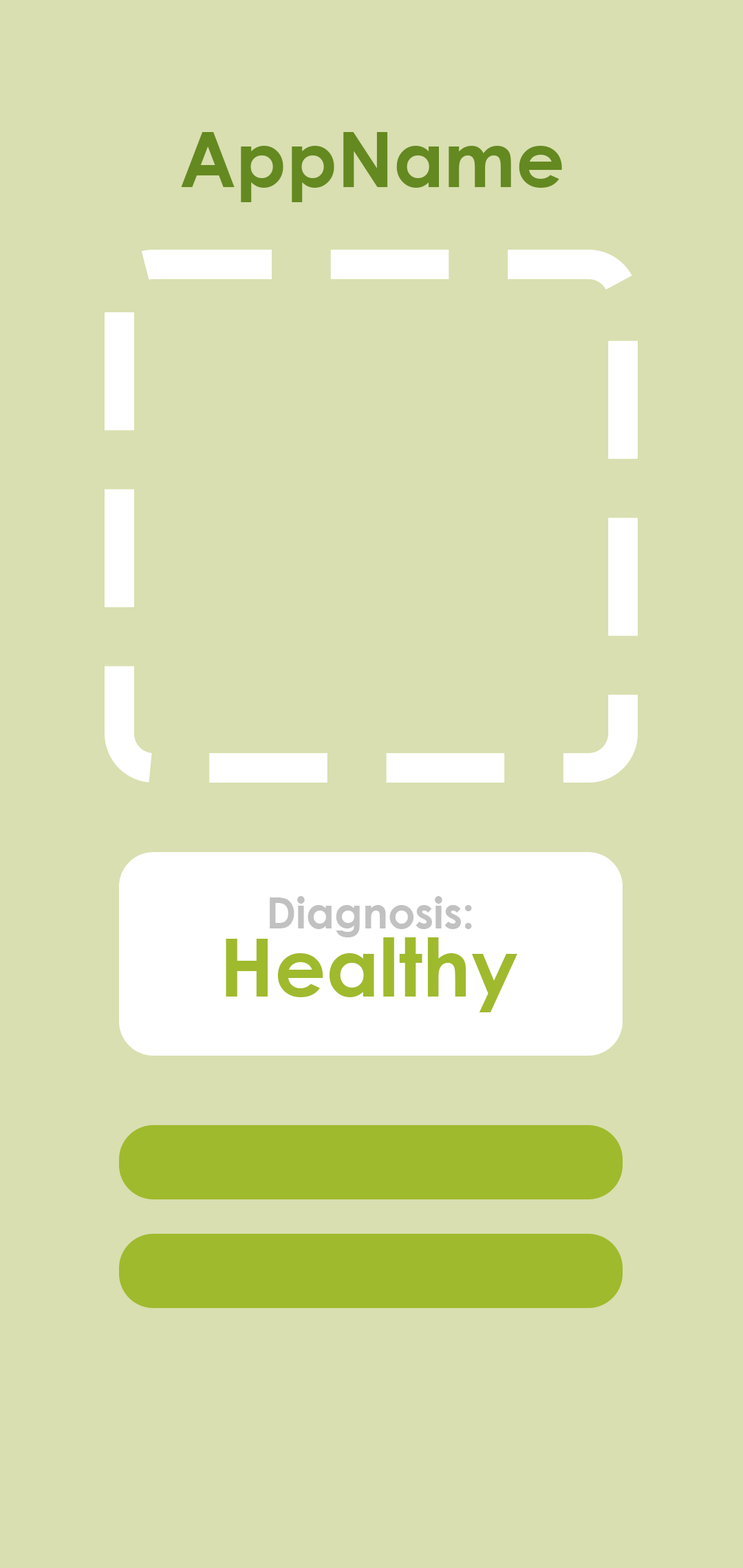
<style>
.page{position:relative;width:743px;height:1568px;background:#d9dfb0}
.page>*{position:absolute;margin:0}
.t1{font:76.3px "CenturyGothic-Bold";color:#648920}
.t2{font:42.4px "CenturyGothic-Bold";color:#c1c1c1}
.t3{font:80.6px "CenturyGothic-Bold";color:#9fba2d}
</style>
<div class="page">
<p class="t1" style="left:181px;top:132px;width:381px;height:70px">AppName</p>
<p class="t2" style="left:270px;top:896px;width:202px;height:41px">Diagnosis:</p>
<p class="t3" style="left:226px;top:937px;width:291px;height:75px">Healthy</p>
</div>
